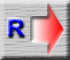
<style>
.page{position:relative;width:70px;height:60px}
.page>*{position:absolute;margin:0}
.t1{font:24px "Arial-BoldMT"}
</style>
<div class="page">
<p class="t1" style="left:8px;top:19px;width:17px;height:18px">R</p>
</div>
